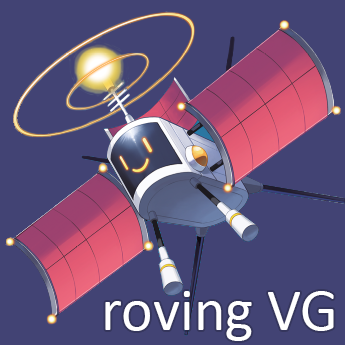
<style>
.page{position:relative;width:345px;height:345px;background:#424374}
.page>*{position:absolute;margin:0}
.t1{font:60px "Calibri";color:#ffffff}
</style>
<div class="page">
<p class="t1" style="left:105px;top:291px;width:229px;height:50px">roving VG</p>
</div>
